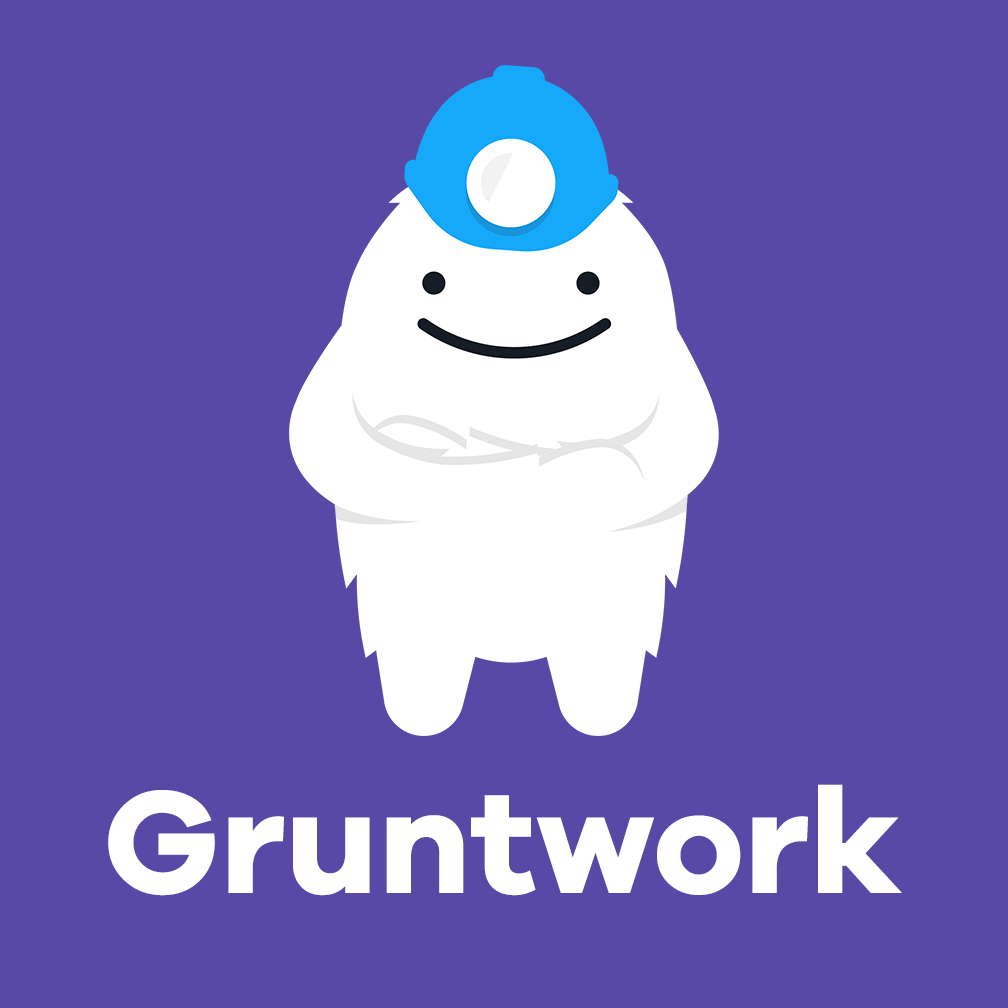
<style>
.page{position:relative;width:1008px;height:1008px;background:#5849a6}
.page>*{position:absolute;margin:0}
.t1{font:150px "GalanoGrotesque-Bold";color:#ffffff}
</style>
<div class="page">
<p class="t1" style="left:108px;top:784px;width:794px;height:112px">Gruntwork</p>
</div>
